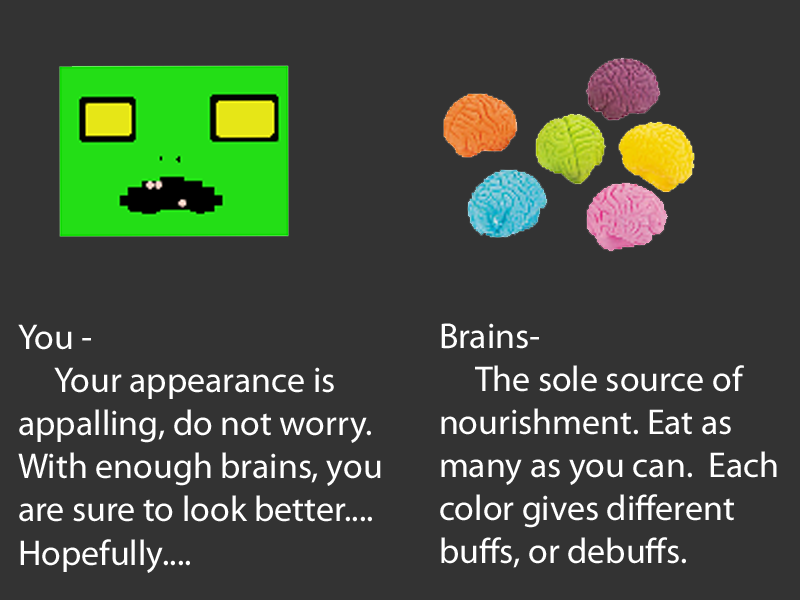
<style>
.page{position:relative;width:800px;height:600px;background:#333333}
.page>*{position:absolute;margin:0}
.t1{font:35.9px "MyriadPro-Regular";color:#ffffff}
</style>
<div class="page">
<p class="t1" style="left:18px;top:324px;width:363px;height:249px">You -<br> Your appearance is <br>appalling, do not worry.<br>With enough brains, you<br>are sure to look better....<br>Hopefully....</p>
<p class="t1" style="left:440px;top:323px;width:337px;height:245px">Brains-<br> The sole source of<br>nourishment. Eat as<br>many as you can.  Each<br>color gives different<br>buffs, or debuffs.</p>
</div>
